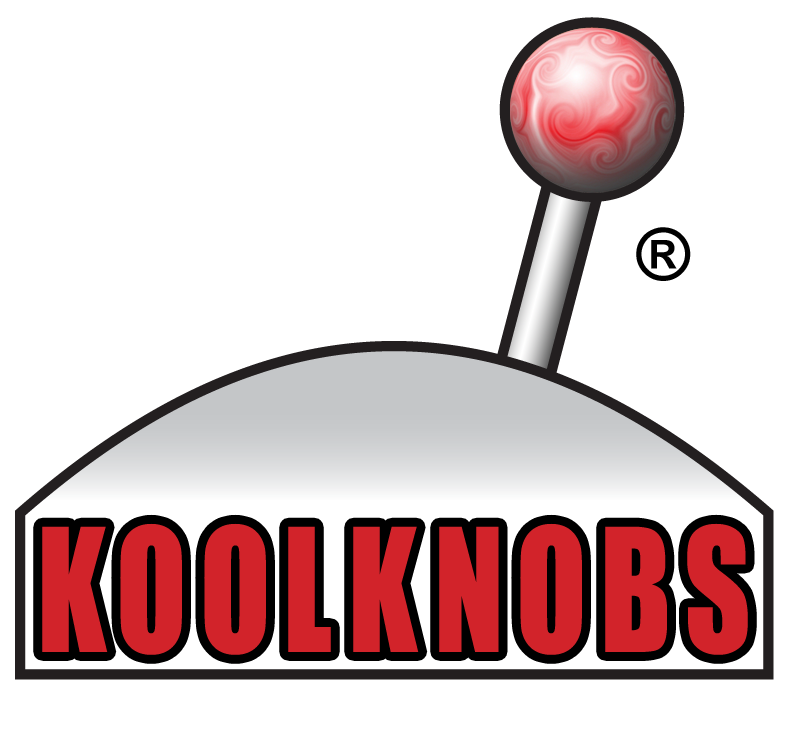
<style>
.page{position:relative;width:804px;height:749px;background:#ffffff}
.page>*{position:absolute;margin:0}
.t1{font:72px "Impact";letter-spacing:0.1em;color:#000000}
.t2{font:158.4px "Impact";letter-spacing:0.1em;color:#d2232a;scale:0.81 1}
</style>
<div class="page">
<p class="t1" style="left:636px;top:227px;width:55px;height:54px">®</p>
<p class="t2" style="left:42px;top:523px;width:706px;height:132px">KOOLKNOBS</p>
</div>
